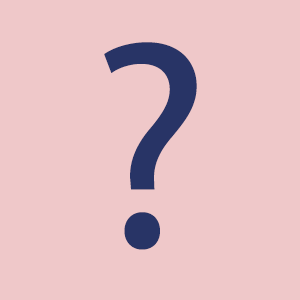
<style>
.page{position:relative;width:300px;height:300px;background:#efc8c9}
.page>*{position:absolute;margin:0}
.t1{font:297.8px "MyriadPro-Regular";color:#283466}
</style>
<div class="page">
<p class="t1" style="left:104px;top:42px;width:93px;height:208px">?</p>
</div>
